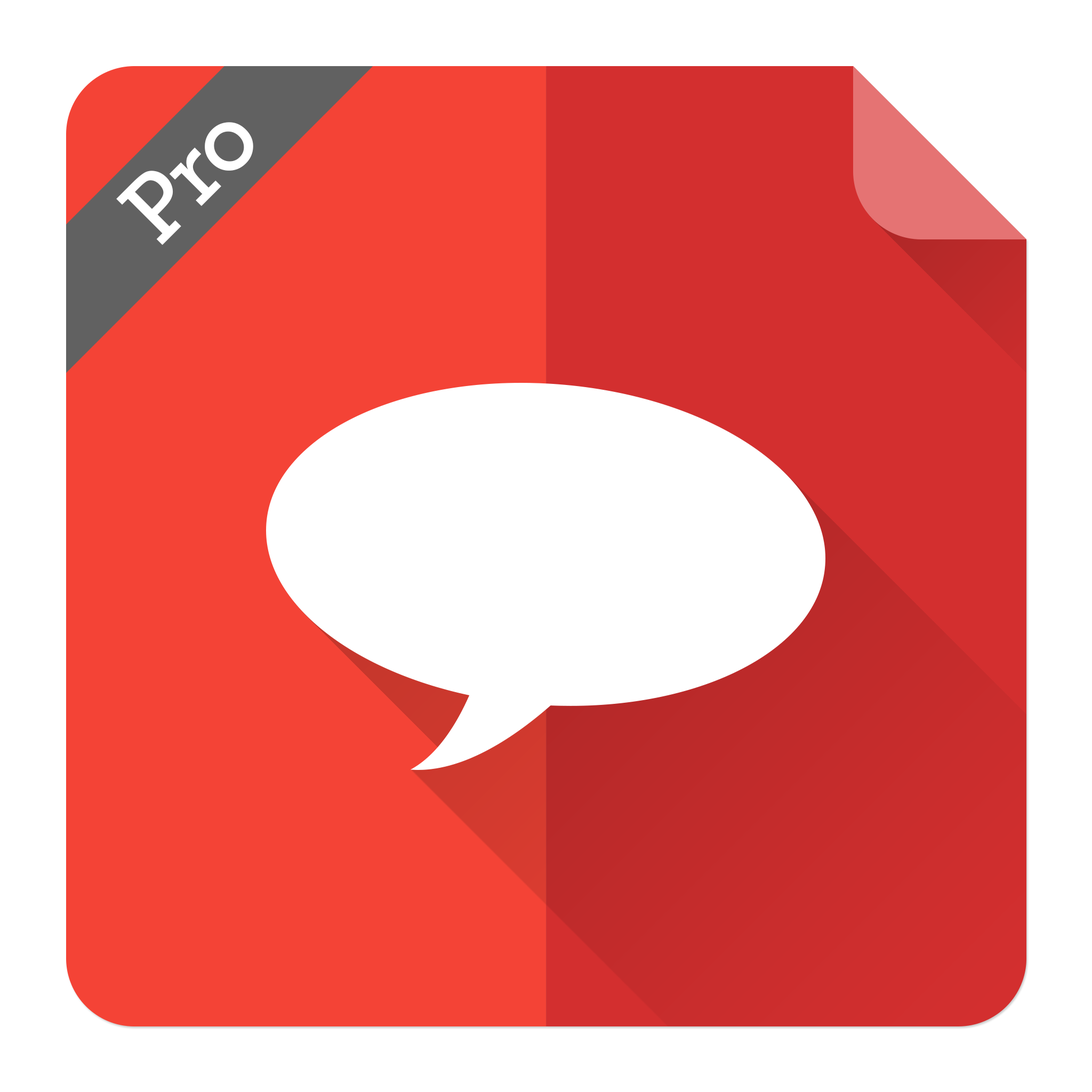
<style>
.page{position:relative;width:1092px;height:1092px;background:#ffffff}
.page>*{position:absolute;margin:0}
.t1{font:95.8px "Rockwell";color:#ffffff}
</style>
<div class="page">
<p class="t1" style="left:116px;top:122px;width:137px;height:123px;rotate:-45deg">Pro</p>
</div>
